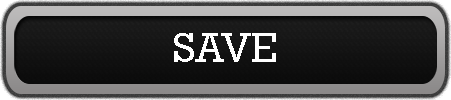
<style>
.page{position:relative;width:451px;height:100px}
.page>*{position:absolute;margin:0}
.t1{font:41.7px "Rockwell";color:#ffffff}
</style>
<div class="page">
<p class="t1" style="left:174px;top:33px;width:102px;height:29px">SAVE</p>
</div>
